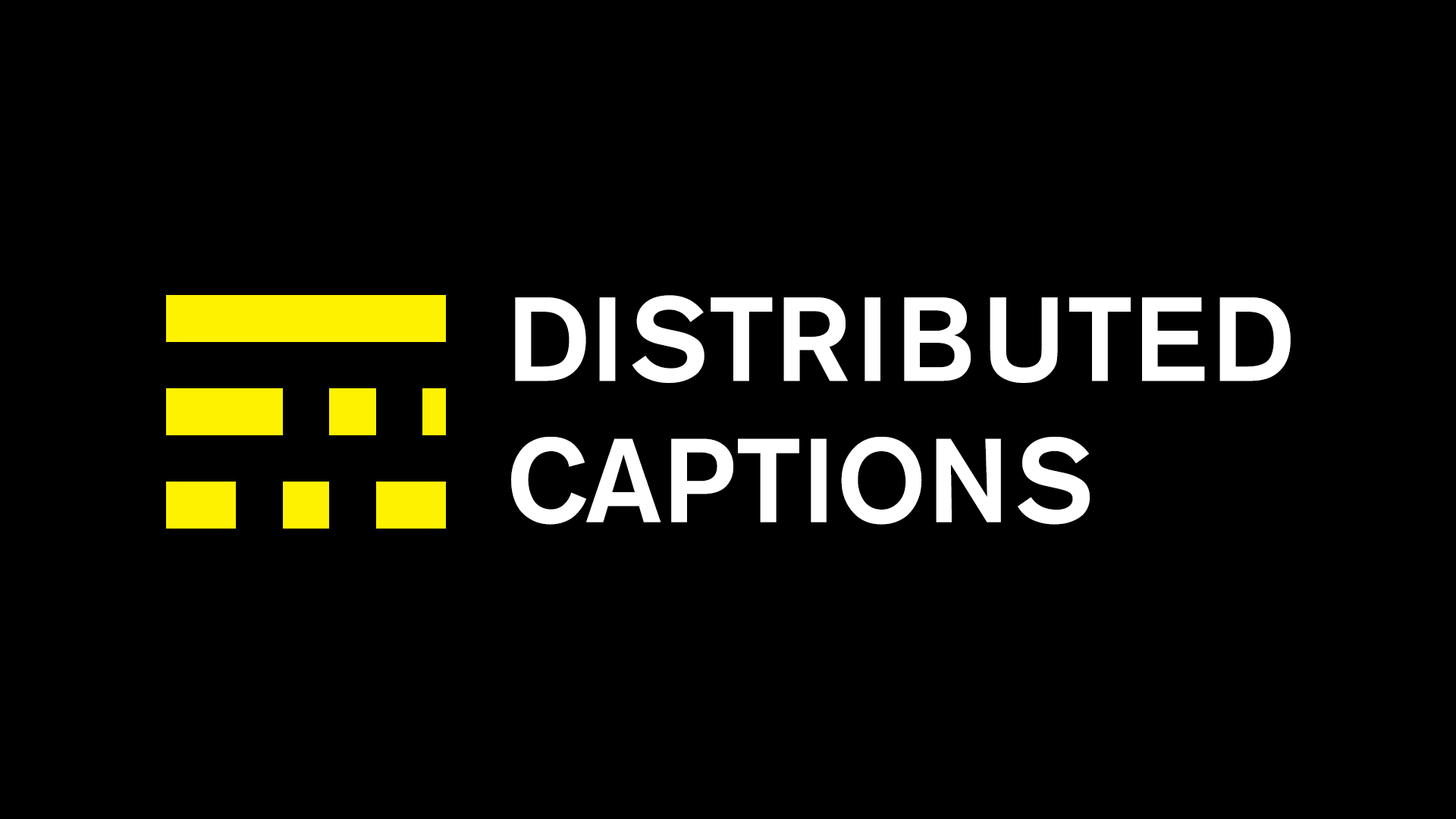
<style>
.page{position:relative;width:1456px;height:819px;background:#000000}
.page>*{position:absolute;margin:0}
.t1{font:117.8px "AkzidenzGroteskPro-Md";color:#ffffff}
</style>
<div class="page">
<p class="t1" style="left:511px;top:295px;width:780px;height:230px">DISTRIBUTED <br>CAPTIONS</p>
</div>
